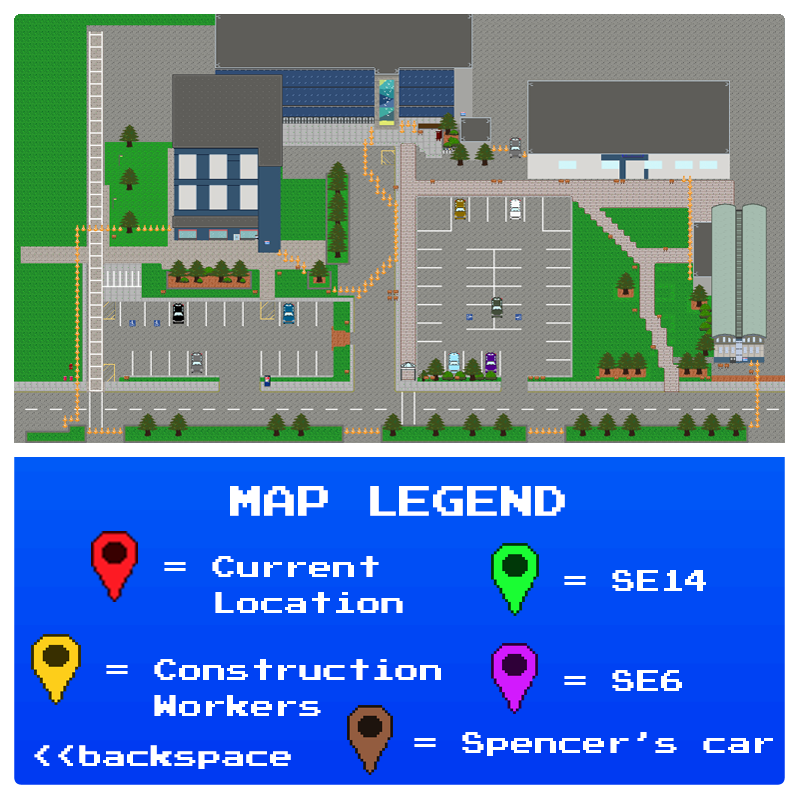
<style>
.page{position:relative;width:799px;height:799px}
.page>*{position:absolute;margin:0}
.t1{font:33.9px "PressStart2P";color:#ffffff}
.t2{font:24.1px/36px "PressStart2P";color:#ffffff}
.t3{font:24.1px "PressStart2P";color:#ffffff}
.t4{font:23.9px "PressStart2P";color:#ffffff}
</style>
<div class="page">
<p class="t1" style="left:230px;top:486px;width:335px;height:30px">MAP LEGEND</p>
<p class="t2" style="left:164px;top:556px;width:239px;height:57px">= Current<br> Location</p>
<p class="t3" style="left:564px;top:570px;width:142px;height:21px">= SE14</p>
<p class="t2" style="left:106px;top:659px;width:335px;height:57px">= Construction<br> Workers</p>
<p class="t3" style="left:564px;top:670px;width:118px;height:21px">= SE6</p>
<p class="t3" style="left:414px;top:732px;width:359px;height:24px">= Spencer’s car</p>
<p class="t4" style="left:34px;top:745px;width:257px;height:24px">&lt;&lt;backspace</p>
</div>
